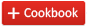
<style>
.page{position:relative;width:87px;height:27px}
.page>*{position:absolute;margin:0}
.t1{font:24px "Calibri";color:#ffffff;scale:1.1 1}
.t2{font:13.7px "Calibri";color:#ffffff;scale:0.95 1}
</style>
<div class="page">
<p class="t1" style="left:7px;top:7px;width:13px;height:12px">+</p>
<p class="t2" style="left:24px;top:7px;width:54px;height:11px">Cookbook</p>
</div>
